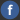
<style>
.page{position:relative;width:20px;height:20px;background:#3b5f97}
.page>*{position:absolute;margin:0}
.t1{font:14px "Arial-BoldMT";letter-spacing:0.025em;color:#fcfdfd}
</style>
<div class="page">
<p class="t1" style="left:7px;top:4px;width:6px;height:11px">f</p>
</div>
